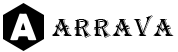
<style>
.page{position:relative;width:178px;height:52px;background:#ffffff}
.page>*{position:absolute;margin:0}
.t1{font:26px "Algerian";letter-spacing:0.1em;color:#000000}
</style>
<div class="page">
<p class="t1" style="left:52px;top:15px;width:122px;height:23px">ARRAVA</p>
</div>
